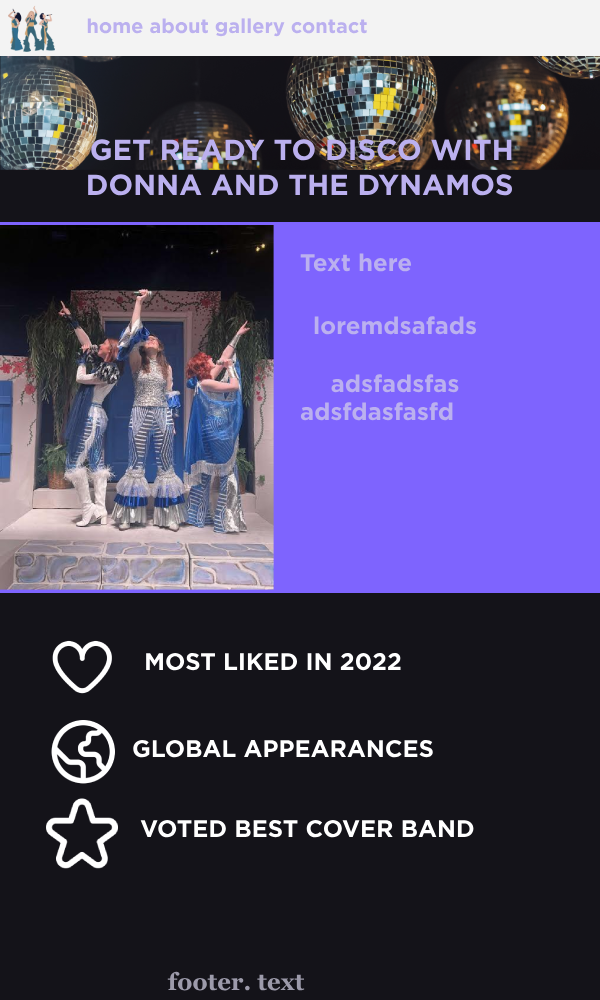
<style>
.page{position:relative;width:600px;height:1000px;background:#141319}
.page>*{position:absolute;margin:0}
.t1{font:20px "Gotham-Bold";color:#bbb0ef}
.t2{font:29.1px "Gotham-Bold";color:#bbb0ef}
.t3{font:24px "Gotham-Bold";color:#bbb0ef}
.t4{font:24px "Gotham-Bold";color:#ffffff}
.t5{font:24px "Georgia-Bold";color:#9d9bab}
</style>
<div class="page">
<p class="t1" style="left:87px;top:18px;width:280px;height:19px">home about gallery contact</p>
<p class="t2" style="left:88px;top:139px;width:424px;height:57px;text-align:center">GET READY TO DISCO WITH<br>DONNA AND THE DYNAMOS</p>
<p class="t3" style="left:300px;top:253px;width:112px;height:19px">Text here</p>
<p class="t3" style="left:300px;top:316px;width:177px;height:105px;text-align:center"><span class="t4">lorem</span>dsafads<br><br>adsfadsfas<br>adsfdasfasfd</p>
<p class="t4" style="left:146px;top:652px;width:255px;height:19px">MOST LIKED IN 2022</p>
<p class="t4" style="left:133px;top:739px;width:300px;height:19px">GLOBAL APPEARANCES</p>
<p class="t4" style="left:140px;top:819px;width:334px;height:19px">VOTED BEST COVER BAND</p>
<p class="t5" style="left:167px;top:971px;width:138px;height:20px">footer. text</p>
</div>
